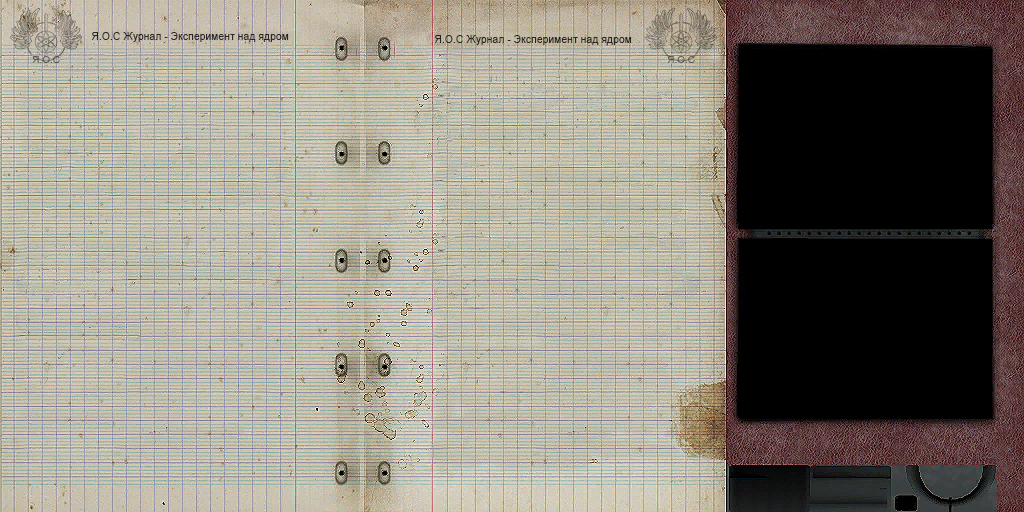
<style>
.page{position:relative;width:1024px;height:512px}
.page>*{position:absolute;margin:0}
.t1{font:11px "ArialMT";color:#2a2722;scale:0.95 1}
.t2{font:11px "ArialMT";color:#282621;scale:0.95 1}
.t3{font:10px "ArialMT";color:#5d5a56}
.t4{font:10px "ArialMT";color:#5e5955}
</style>
<div class="page">
<p class="t1" style="left:92px;top:32px;width:197px;height:10px">Я.О.С Журнал - Эксперимент над ядром</p>
<p class="t2" style="left:435px;top:35px;width:197px;height:10px">Я.О.С Журнал - Эксперимент над ядром</p>
<p class="t3" style="left:32px;top:56px;width:28px;height:7px">Я.О.С</p>
<p class="t4" style="left:667px;top:56px;width:28px;height:7px">Я.О.С</p>
</div>
